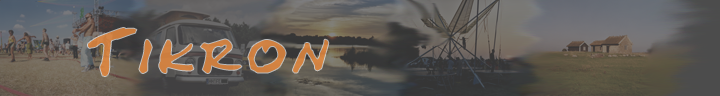
<style>
.page{position:relative;width:720px;height:96px}
.page>*{position:absolute;margin:0}
.t1{font:48px "CrackedJohnnie";letter-spacing:0.2em;color:#cf8041;font-variant:small-caps}
</style>
<div class="page">
<p class="t1" style="left:88px;top:28px;width:241px;height:48px">Tikron</p>
</div>
